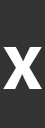
<style>
.page{position:relative;width:45px;height:128px;background:#333333}
.page>*{position:absolute;margin:0}
.t1{font:75px "AdobeGothicStd-Bold";color:#ffffff}
</style>
<div class="page">
<p class="t1" style="left:3px;top:47px;width:39px;height:42px">x</p>
</div>
